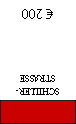
<style>
.page{position:relative;width:76px;height:124px;background:#ffffff}
.page>*{position:absolute;margin:0}
.t1{font:14px "MyriadPro-Regular";color:#000000}
.t2{font:11px "AdobeDevanagari-Regular";color:#000000;scale:0.9 1}
</style>
<div class="page">
<p class="t1" style="left:22px;top:9px;width:31px;height:10px;rotate:180deg">€ 200</p>
<p class="t2" style="left:16px;top:75px;width:43px;height:20px;text-align:center;rotate:180deg">SCHILLER-<br>STRASSE</p>
</div>
